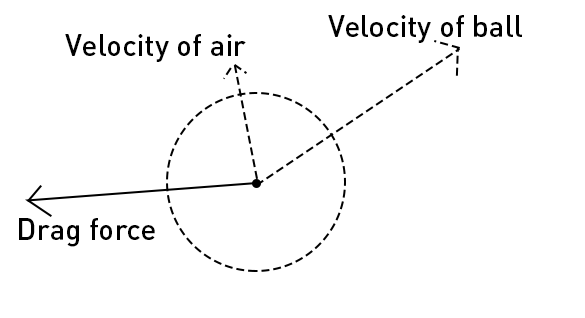
<style>
.page{position:relative;width:585px;height:318px;background:#ffffff}
.page>*{position:absolute;margin:0}
.t1{font:30px "DIN-MediumAlternate";color:#000000}
</style>
<div class="page">
<p class="t1" style="left:328px;top:15px;width:194px;height:28px">Velocity of ball</p>
<p class="t1" style="left:65px;top:34px;width:181px;height:28px">Velocity of air</p>
<p class="t1" style="left:19px;top:218px;width:136px;height:29px">Drag force</p>
</div>
